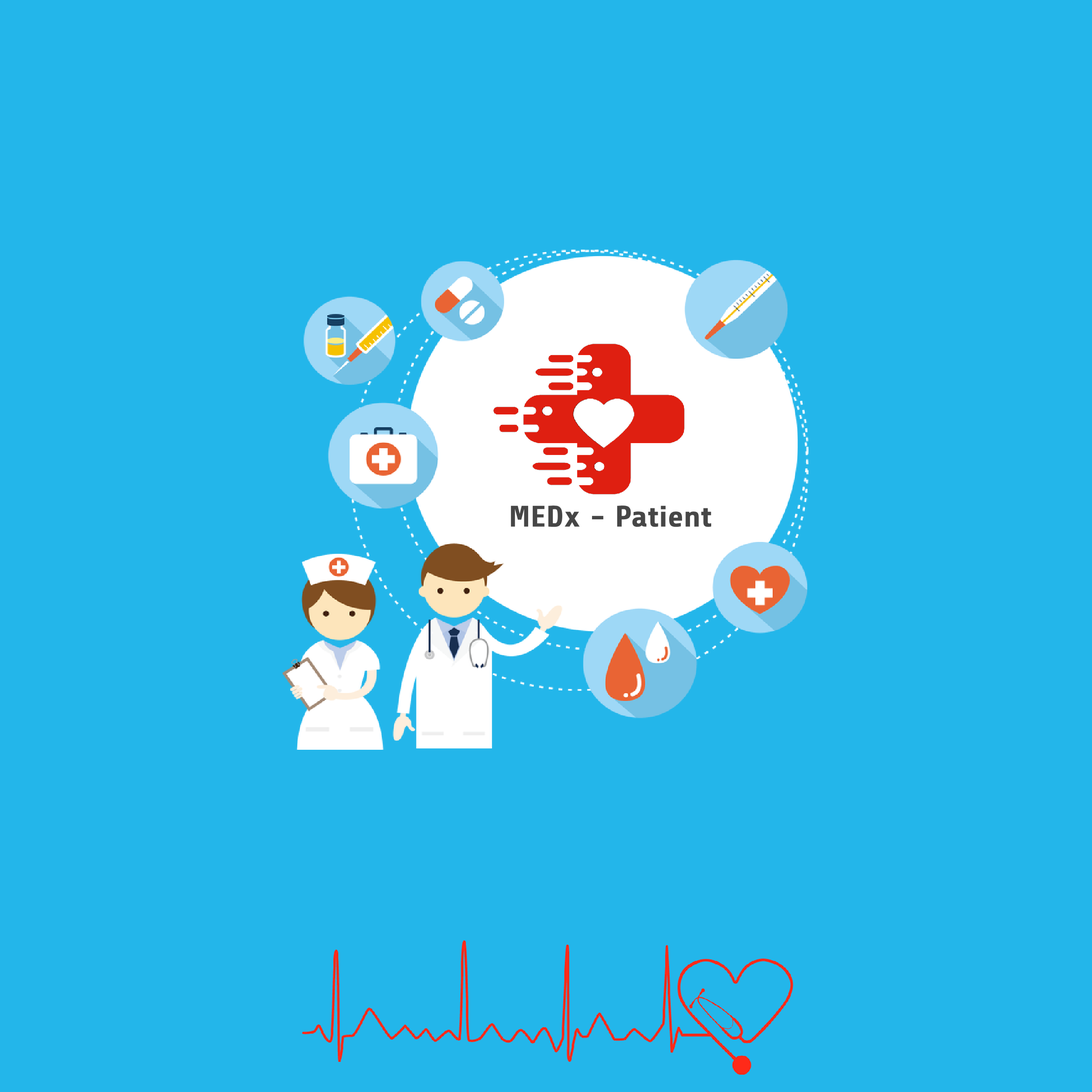
<style>
.page{position:relative;width:1092px;height:1092px;background:#23b6ea}
.page>*{position:absolute;margin:0}
.t1{font:29.6px "Share-BoldOSF";color:#464646;scale:1.1 1}
</style>
<div class="page">
<p class="t1" style="left:511px;top:505px;width:201px;height:22px">MEDx - Patient</p>
</div>
